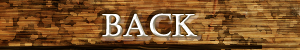
<style>
.page{position:relative;width:300px;height:50px}
.page>*{position:absolute;margin:0}
.t1{font:30px "Castellar";color:#ffffff;font-weight:bold}
</style>
<div class="page">
<p class="t1" style="left:102px;top:13px;width:96px;height:24px">Back</p>
</div>
